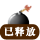
<style>
.page{position:relative;width:40px;height:40px;background:#ffffff}
.page>*{position:absolute;margin:0}
.t1{font:10px "HYa9gj";letter-spacing:0.1em;color:#ffffff}
</style>
<div class="page">
<p class="t1" style="left:4px;top:26px;width:32px;height:11px">已释放</p>
</div>
